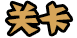
<style>
.page{position:relative;width:77px;height:38px;background:#ffffff}
.page>*{position:absolute;margin:0}
.t1{font:32px "FZJZJW--GB1-0";color:#d7a559}
</style>
<div class="page">
<p class="t1" style="left:7px;top:3px;width:64px;height:31px">关卡</p>
</div>
